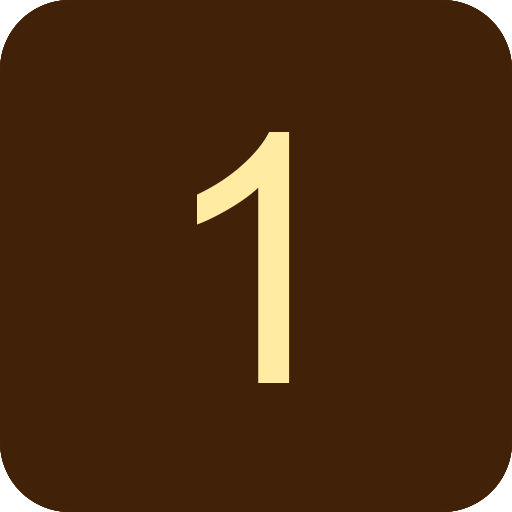
<style>
.page{position:relative;width:512px;height:512px;background:#412209}
.page>*{position:absolute;margin:0}
.t1{font:349px "ArialMT";color:#ffeba1}
</style>
<div class="page">
<p class="t1" style="left:197px;top:132px;width:93px;height:251px">1</p>
</div>
